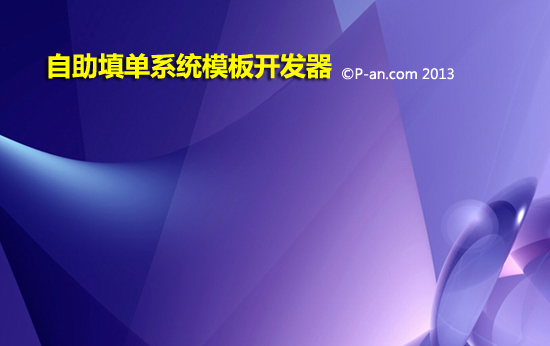
<style>
.page{position:relative;width:550px;height:346px}
.page>*{position:absolute;margin:0}
.t1{font:26px "MicrosoftYaHei-Bold";color:#fdfa02}
.t2{font:14px "MicrosoftYaHei";color:#ffffff}
</style>
<div class="page">
<p class="t1" style="left:48px;top:53px;width:284px;height:26px">自助填单系统模板开发器</p>
<p class="t2" style="left:342px;top:68px;width:112px;height:12px">©P-an.com 2013</p>
</div>
